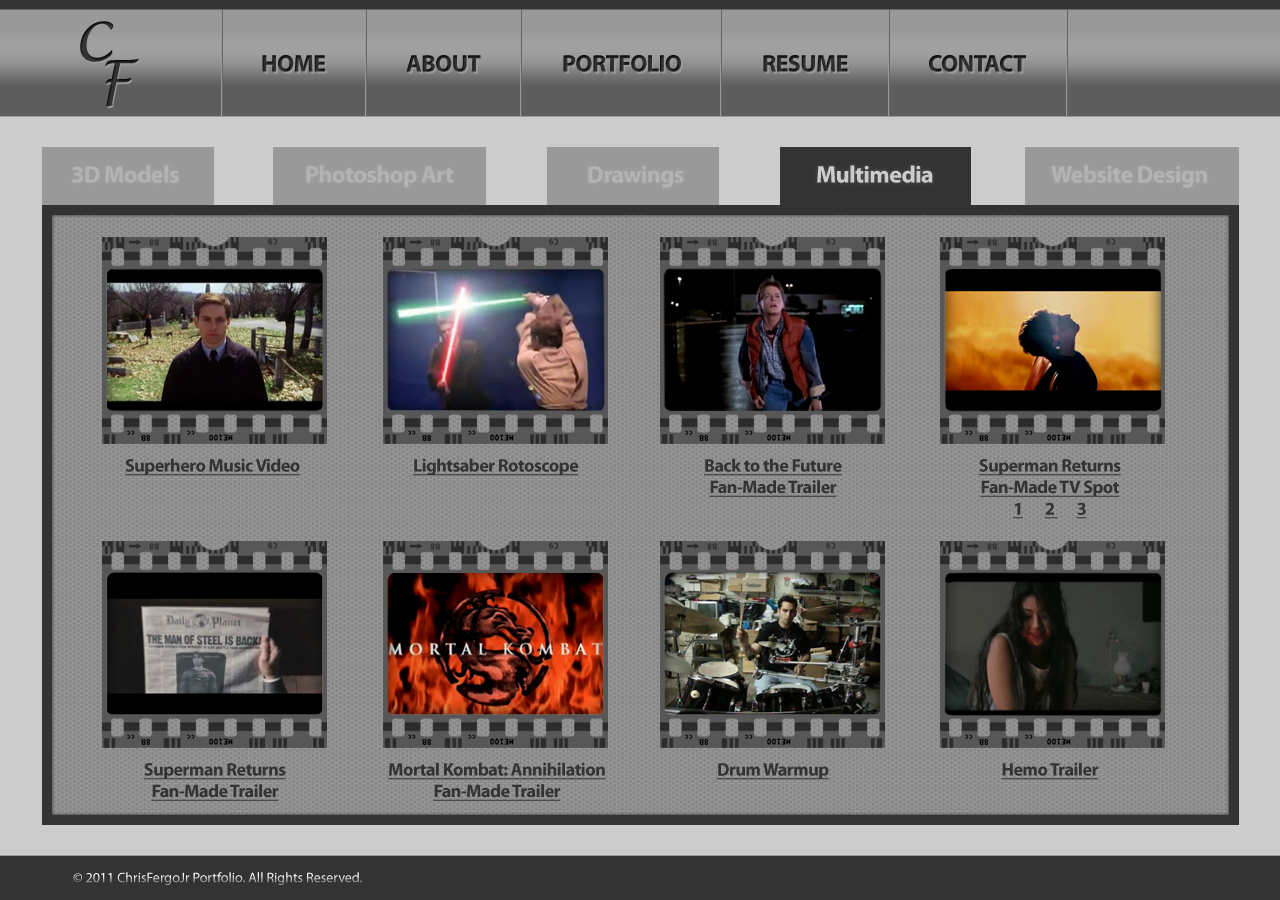
<style>
.page{position:relative;width:1280px;height:900px}
.page>*{position:absolute;margin:0}
.t1{font:24px "MyriadPro-Bold";letter-spacing:-0.025em;color:#282828}
.t2{font:24px "MyriadPro-Bold";letter-spacing:-0.025em;color:#262626}
.t3{font:24px "MyriadPro-Bold";letter-spacing:-0.025em;color:#b3b3b3}
.t4{font:24px "MyriadPro-Bold";letter-spacing:-0.025em;color:#cccccc}
.t5{font:18px "MyriadPro-Bold";letter-spacing:-0.025em;color:#333333;text-decoration:underline}
.t6{font:14px "MyriadPro-Regular"}
</style>
<div class="page">
<p class="t1" style="left:262px;top:55px;width:63px;height:17px">HOME</p>
<p class="t1" style="left:406px;top:55px;width:75px;height:17px">ABOUT</p>
<p class="t2" style="left:563px;top:55px;width:118px;height:17px">PORTFOLIO</p>
<p class="t2" style="left:763px;top:55px;width:85px;height:17px">RESUME</p>
<p class="t2" style="left:929px;top:55px;width:97px;height:17px">CONTACT</p>
<p class="t3" style="left:72px;top:165px;width:107px;height:18px">3D Models</p>
<p class="t3" style="left:306px;top:165px;width:148px;height:23px">Photoshop Art</p>
<p class="t3" style="left:588px;top:165px;width:96px;height:23px">Drawings</p>
<p class="t4" style="left:817px;top:165px;width:116px;height:18px">Multimedia</p>
<p class="t3" style="left:1051px;top:165px;width:156px;height:23px">Website Design</p>
<p class="t5" style="left:125px;top:458px;width:175px;height:18px">Superhero Music Video</p>
<p class="t5" style="left:413px;top:458px;width:166px;height:18px">Lightsaber Rotoscope</p>
<p class="t5" style="left:704px;top:458px;width:138px;height:39px;text-align:center">Back to the Future<br>Fan-Made Trailer</p>
<p class="t5" style="left:978px;top:459px;width:143px;height:60px;text-align:center">Superman Returns<br>Fan-Made TV Spot<br>1       2       3</p>
<p class="t5" style="left:143px;top:763px;width:143px;height:38px;text-align:center">Superman Returns<br>Fan-Made Trailer</p>
<p class="t5" style="left:388px;top:762px;width:218px;height:39px;text-align:center">Mortal Kombat: Annihilation<br>Fan-Made Trailer</p>
<p class="t5" style="left:716px;top:763px;width:113px;height:17px">Drum Warmup</p>
<p class="t5" style="left:1001px;top:762px;width:98px;height:18px">Hemo Trailer</p>
<p class="t6" style="left:73px;top:872px;width:289px;height:13px">© 2011 ChrisFergoJr Portfolio. All Rights Reserved.</p>
</div>
